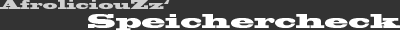
<style>
.page{position:relative;width:400px;height:30px;background:#333333}
.page>*{position:absolute;margin:0}
.t1{font:11px "BlackoakStd";color:#cfcfcf}
.t2{font:18px "BlackoakStd";color:#ffffff}
</style>
<div class="page">
<p class="t1" style="left:0px;top:0px;width:170px;height:9px">AfroliciouZz‘</p>
<p class="t2" style="left:88px;top:14px;width:312px;height:17px">Speichercheck</p>
</div>
